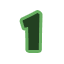
<style>
.page{position:relative;width:64px;height:64px;background:#ffffff}
.page>*{position:absolute;margin:0}
.t1{font:48px "ShowcardGothic-Reg";color:#234021}
</style>
<div class="page">
<p class="t1" style="left:22px;top:13px;width:18px;height:37px">1</p>
</div>
